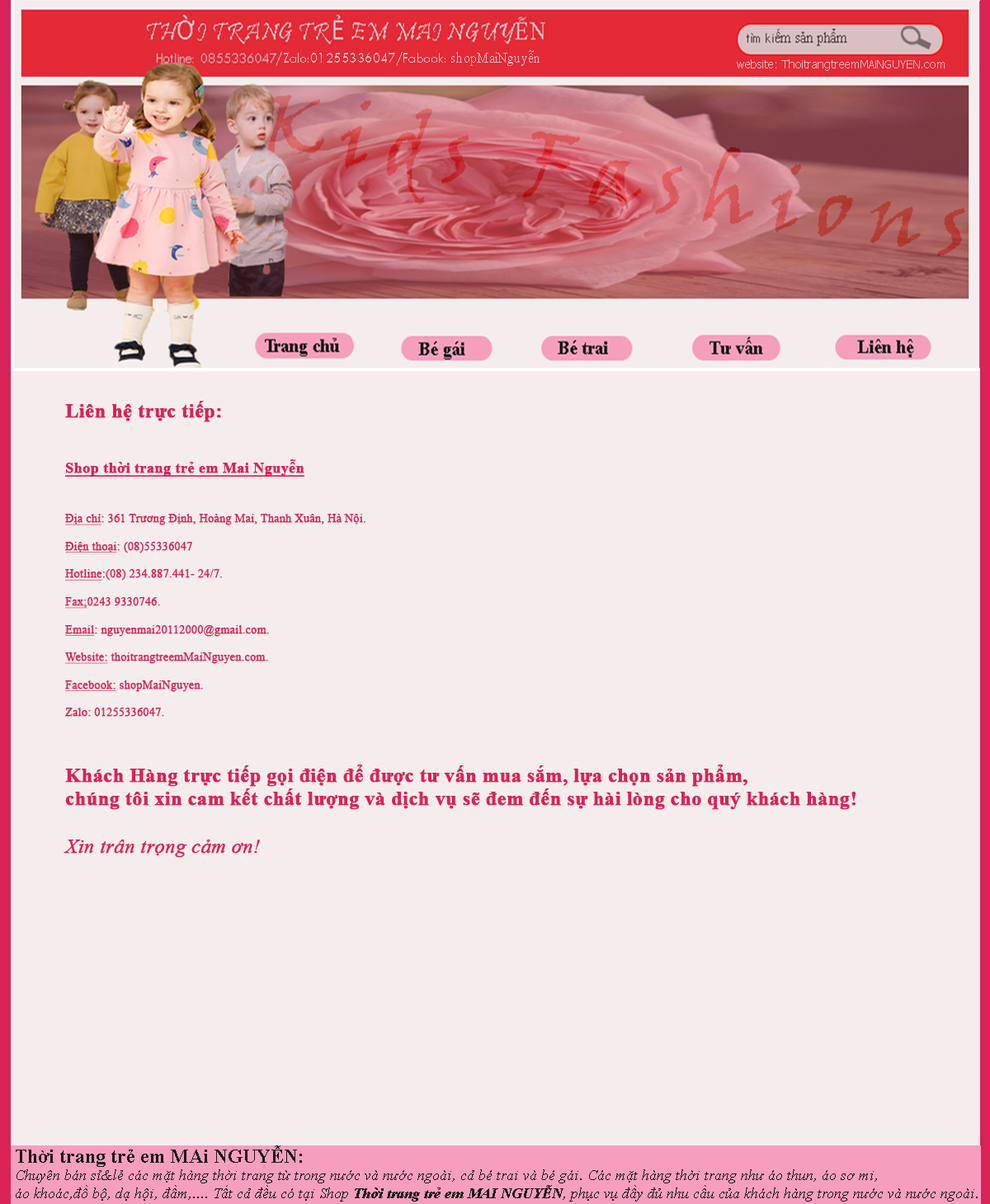
<style>
.page{position:relative;width:990px;height:1204px;background:#f5eced}
.page>*{position:absolute;margin:0}
.t1{font:14.9px "TwCenMT-Regular";letter-spacing:0.005em;color:#d4b7b9;scale:0.91 1}
.t2{font:14.9px "TimesNewRomanPSMT";letter-spacing:0.005em;color:#d4b7b9;scale:0.91 1}
.t3{font:11.6px "Tahoma";letter-spacing:0.005em;color:#d4b7b9}
.t4{font:19.8px "TimesNewRomanPS-BoldMT";color:#d92356;font-weight:bold}
.t5{font:14.8px "TimesNewRomanPS-BoldMT";color:#d92356;font-weight:bold;text-decoration:underline}
.t6{font:11.5px "TimesNewRomanPSMT";color:#d92356;font-weight:bold;text-decoration:underline}
.t7{font:11.5px "TimesNewRomanPSMT";color:#d92356;font-weight:bold}
.t8{font:19.8px "TimesNewRomanPS-ItalicMT";color:#d92356;font-weight:bold}
.t9{font:14.8px "TimesNewRomanPS-ItalicMT";color:#1b1919}
.t10{font:19.8px "TimesNewRomanPS-BoldMT";color:#1b1919}
.t11{font:14.8px "TimesNewRomanPS-BoldItalicMT";color:#1b1919}
</style>
<div class="page">
<p class="t1" style="left:276px;top:50px;width:264px;height:16px">/Zalo:01255336047/Fabook: <span class="t2">shopMaiNguyễn</span></p>
<p class="t3" style="left:737px;top:59px;width:208px;height:12px">website: ThoitrangtreemMAiNGUYEN.com</p>
<p class="t4" style="left:64px;top:401px;width:792px;height:457px">Liên hệ trực tiếp:<br><br><br><span class="t5">Shop thời trang trẻ em Mai Nguyễn<br><br><br></span><span class="t6">Địa chỉ</span><span class="t7">: 361 Trương Định, Hoàng Mai, Thanh Xuân, Hà Nội.<br><br></span><span class="t6">Điện thoại</span><span class="t7">: (08)55336047<br><br></span><span class="t6">Hotline</span><span class="t7">:(08) 234.887.441- 24/7.<br><br></span><span class="t6">Fax;</span><span class="t7">0243 9330746.<br><br></span><span class="t6">Email</span><span class="t7">: nguyenmai20112000@gmail.com.<br><br></span><span class="t6">Website:</span><span class="t7"> thoitrangtreemMaiNguyen.com.<br><br></span><span class="t6">Facebook:</span><span class="t7"> shopMaiNguyen.<br><br>Zalo: 01255336047.<br><br><br><br></span>Khách Hàng trực tiếp gọi điện để được tư vấn mua sắm, lựa chọn sản phẩm,<br>chúng tôi xin cam kết chất lượng và dịch vụ sẽ đem đến sự hài lòng cho quý khách hàng!<br><br><span class="t8">Xin trân trọng cảm ơn!</span></p>
<p class="t9" style="left:16px;top:1146px;width:962px;height:56px"><span class="t10">Thời trang trẻ em MAi NGUYỄN:<br></span>Chuyên bán sỉ&amp;lẻ các mặt hàng thời trang từ trong nước và nước ngoài, cả bé trai và bé gái. Các mặt hàng thời trang như áo thun, áo sơ mi, <br>áo khoác,đồ bộ, dạ hội, đầm,.... Tất cả đều có tại Shop <span class="t11">Thời trang trẻ em MAI NGUYỄN</span>, phục vụ đầy đủ nhu cầu của khách hàng trong nước và nước ngoài.</p>
</div>
